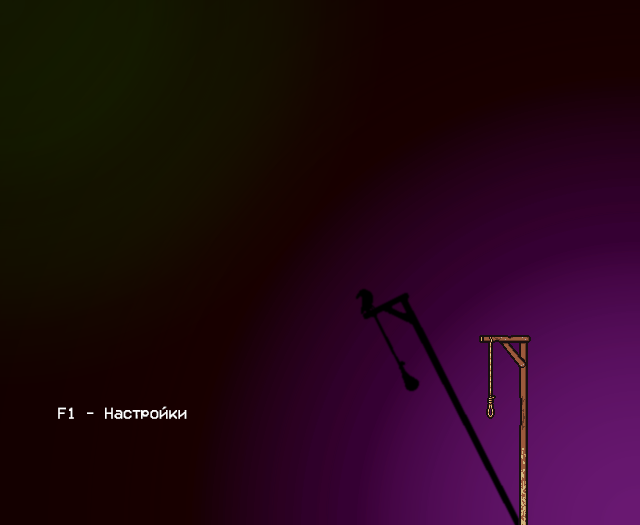
<style>
.page{position:relative;width:640px;height:525px}
.page>*{position:absolute;margin:0}
.t1{font:16px "VCROSDMono";color:#ffffff}
</style>
<div class="page">
<p class="t1" style="left:58px;top:406px;width:129px;height:13px">F1 - Настройки</p>
</div>
